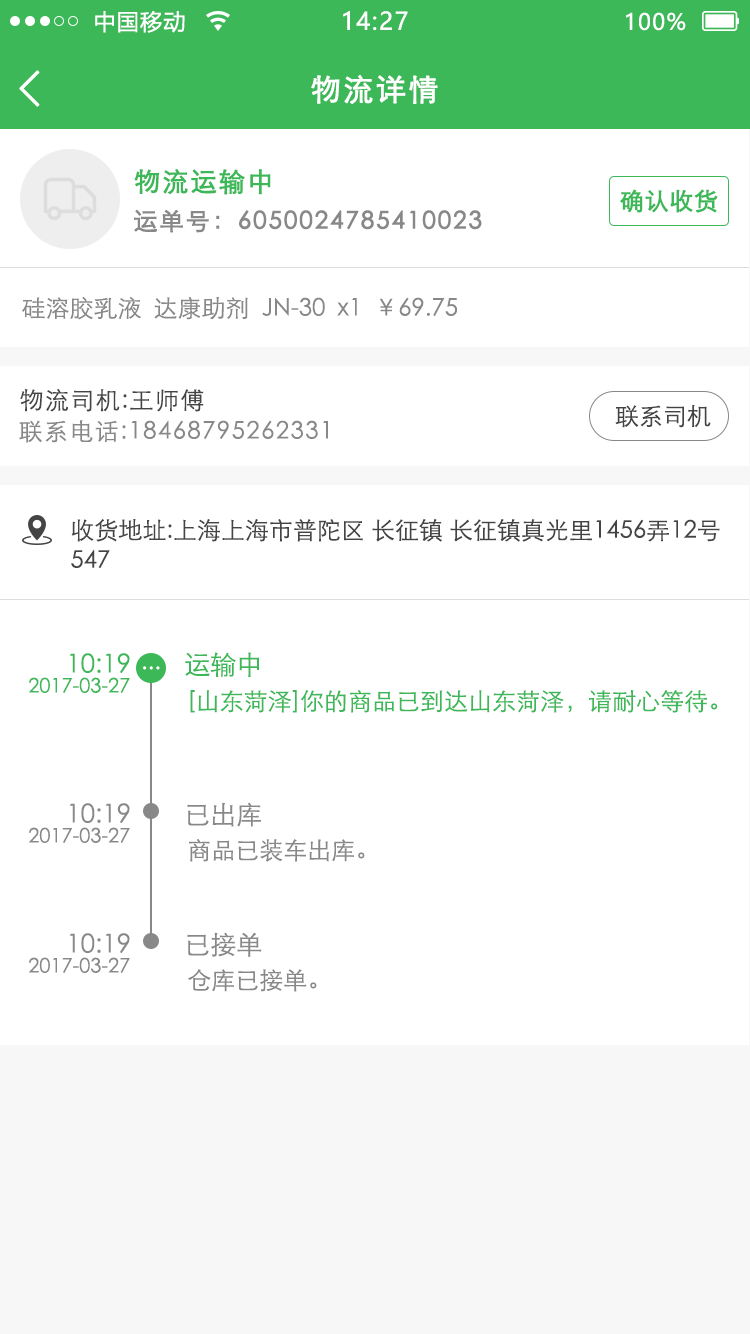
<style>
.page{position:relative;width:750px;height:1334px;background:#ffffff}
.page>*{position:absolute;margin:0}
.t1{font:22px "MicrosoftYaHei";letter-spacing:0.06em;color:#ffffff}
.t2{font:24px "MicrosoftYaHei";letter-spacing:0.06em;color:#ffffff}
.t3{font:49.8px "NSimSun";letter-spacing:0.06em;color:#fefffe;font-weight:bold}
.t4{font:30px "STXihei";letter-spacing:0.06em;color:#fefffe;font-weight:bold}
.t5{font:26px "STXihei";letter-spacing:0.06em;color:#3db858;font-weight:bold}
.t6{font:24px "STXihei";color:#3db858;font-weight:bold}
.t7{font:24px "STXihei";letter-spacing:0.06em;color:#888888;font-weight:bold}
.t8{font:24px "STXihei";color:#888888}
.t9{font:24px "STXihei";letter-spacing:0.06em;color:#444444}
.t10{font:24px "STXihei";color:#444444}
.t11{font:24px "STXihei";letter-spacing:0.06em;color:#888888}
.t12{font:24px/30px "STXihei";color:#444444}
.t13{font:26px "STXihei";color:#3db858}
.t14{font:20px "STXihei";color:#3db858}
.t15{font:24px "STXihei";color:#ffffff}
.t16{font:24px "STXihei";color:#3db858}
.t17{font:26px "STXihei";color:#888888}
.t18{font:20px "STXihei";color:#888888}
</style>
<div class="page">
<p class="t1" style="left:95px;top:10px;width:90px;height:23px">中国移动</p>
<p class="t2" style="left:343px;top:11px;width:65px;height:20px">14:27</p>
<p class="t1" style="left:626px;top:12px;width:60px;height:19px">100%</p>
<p class="t3" style="left:19px;top:70px;width:21px;height:37px">&lt;</p>
<p class="t4" style="left:311px;top:74px;width:127px;height:30px">物流详情</p>
<p class="t5" style="left:134px;top:168px;width:137px;height:27px">物流运输中</p>
<p class="t6" style="left:620px;top:189px;width:98px;height:24px">确认收货</p>
<p class="t7" style="left:134px;top:209px;width:348px;height:24px">运单号：6050024785410023</p>
<p class="t8" style="left:22px;top:296px;width:435px;height:24px">硅溶胶乳液  达康助剂  JN-30  x1  ￥69.75</p>
<p class="t9" style="left:20px;top:388px;width:184px;height:24px">物流司机:王师傅</p>
<p class="t10" style="left:615px;top:404px;width:96px;height:24px">联系司机</p>
<p class="t11" style="left:19px;top:420px;width:309px;height:23px">联系电话:18468795262331</p>
<p class="t12" style="left:71px;top:518px;width:649px;height:50px">收货地址:上海上海市普陀区 长征镇 长征镇真光里1456弄12号<br>547</p>
<p class="t13" style="left:69px;top:653px;width:61px;height:20px">10:19</p>
<p class="t13" style="left:185px;top:652px;width:74px;height:25px">运输中</p>
<p class="t14" style="left:28px;top:677px;width:102px;height:16px">2017-03-27</p>
<p class="t15" style="left:143px;top:666px;width:17px;height:4px">...</p>
<p class="t16" style="left:190px;top:690px;width:528px;height:23px">[山东菏泽]你的商品已到达山东菏泽，请耐心等待。</p>
<p class="t17" style="left:69px;top:803px;width:61px;height:20px">10:19</p>
<p class="t17" style="left:187px;top:802px;width:74px;height:25px">已出库</p>
<p class="t18" style="left:28px;top:827px;width:102px;height:16px">2017-03-27</p>
<p class="t8" style="left:189px;top:839px;width:176px;height:23px">商品已装车出库。</p>
<p class="t17" style="left:69px;top:933px;width:61px;height:20px">10:19</p>
<p class="t17" style="left:187px;top:932px;width:75px;height:25px">已接单</p>
<p class="t18" style="left:28px;top:957px;width:102px;height:16px">2017-03-27</p>
<p class="t8" style="left:188px;top:969px;width:129px;height:23px">仓库已接单。</p>
</div>
